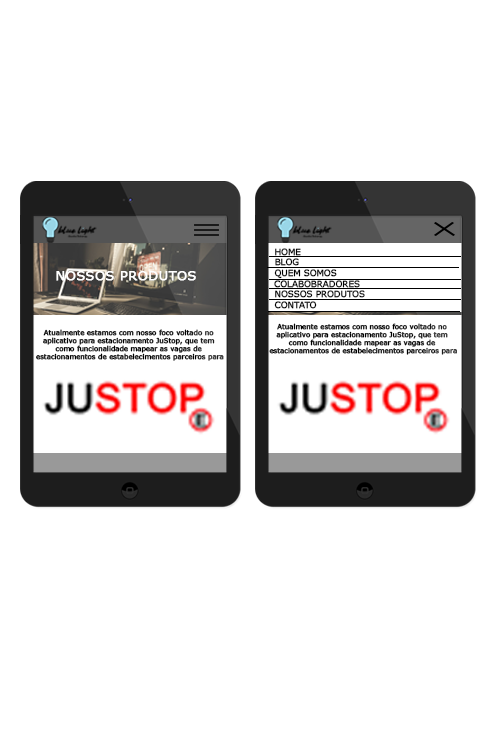
<style>
.page{position:relative;width:501px;height:739px;background:#ffffff}
.page>*{position:absolute;margin:0}
.t1{font:8.4px "Verdana";color:#000000;text-transform:uppercase;font-weight:bold}
.t2{font:13.1px "Verdana";color:#ffffff;font-weight:bold}
.t3{font:6.7px "Verdana";color:#000000;font-weight:bold}
</style>
<div class="page">
<p class="t1" style="left:275px;top:248px;width:26px;height:8px">home</p>
<p class="t1" style="left:274px;top:269px;width:63px;height:10px">Quem somos</p>
<p class="t1" style="left:275px;top:258px;width:24px;height:8px">BLOG</p>
<p class="t2" style="left:56px;top:271px;width:140px;height:10px">NOSSOS PRODUTOS</p>
<p class="t1" style="left:274px;top:280px;width:86px;height:8px">c olabobradores</p>
<p class="t1" style="left:275px;top:290px;width:90px;height:8px">nossos produtos</p>
<p class="t1" style="left:274px;top:301px;width:43px;height:8px">CONTATO</p>
<p class="t3" style="left:36px;top:329px;width:188px;height:32px;text-align:center">Atualmente estamos com nosso foco voltado no <br>aplicativo para estacionamento JuStop, que tem <br>como funcionalidade mapear as vagas de <br>estacionamentos de estabelecimentos parceiros para</p>
<p class="t3" style="left:269px;top:323px;width:188px;height:32px;text-align:center">Atualmente estamos com nosso foco voltado no <br>aplicativo para estacionamento JuStop, que tem <br>como funcionalidade mapear as vagas de <br>estacionamentos de estabelecimentos parceiros para</p>
</div>
